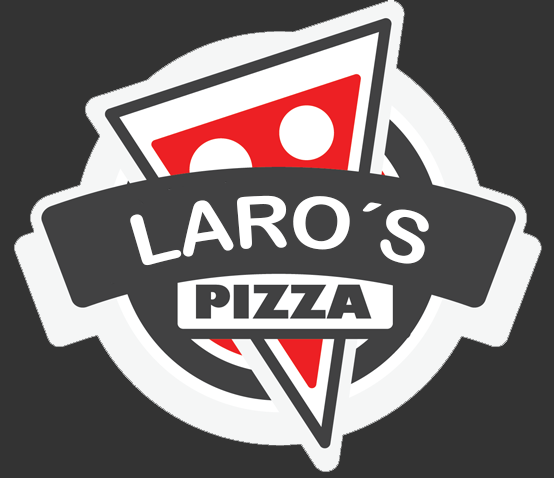
<style>
.page{position:relative;width:554px;height:478px;background:#333333}
.page>*{position:absolute;margin:0}
.t1{font:72px "ArialRoundedMTBold";color:#ffffff}
</style>
<div class="page">
<p class="t1" style="left:130px;top:195px;width:299px;height:71px">LARO´S</p>
</div>
